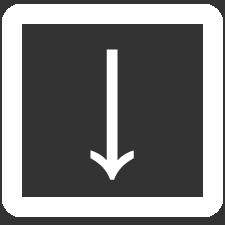
<style>
.page{position:relative;width:225px;height:225px;background:#333333}
.page>*{position:absolute;margin:0}
.t1{font:150px "LucidaConsole";letter-spacing:0.035em;color:#ffffff}
</style>
<div class="page">
<p class="t1" style="left:90px;top:49px;width:44px;height:131px">↓</p>
</div>
